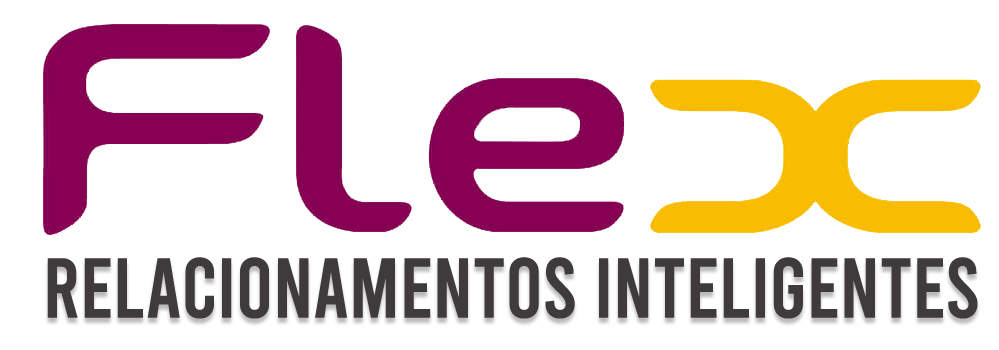
<style>
.page{position:relative;width:999px;height:350px;background:#ffffff}
.page>*{position:absolute;margin:0}
.t1{font:84.8px "Bebas-Regular";color:#3f3b3c}
</style>
<div class="page">
<p class="t1" style="left:47px;top:257px;width:931px;height:62px">RELACIONAMENTOS INTELIGENTES</p>
</div>
